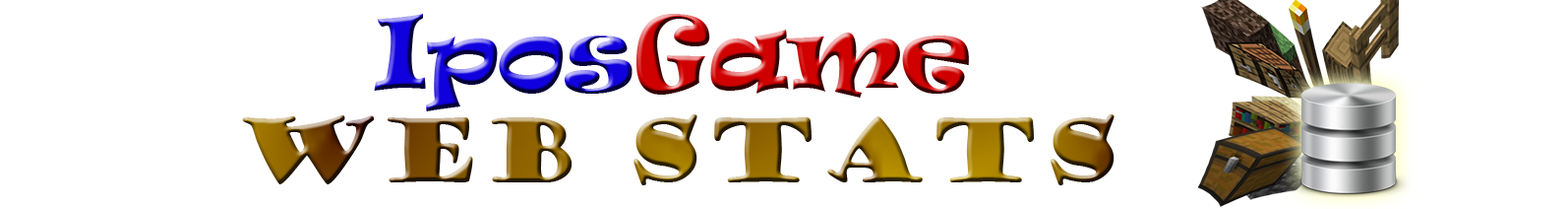
<style>
.page{position:relative;width:1568px;height:209px;background:#ffffff}
.page>*{position:absolute;margin:0}
.t1{font:94.4px "Ravie"}
.t2{font:85.3px "GoudyStout"}
</style>
<div class="page">
<p class="t1" style="left:374px;top:14px;width:595px;height:97px">IposGame</p>
<p class="t2" style="left:242px;top:114px;width:873px;height:71px">Web Stats</p>
</div>
